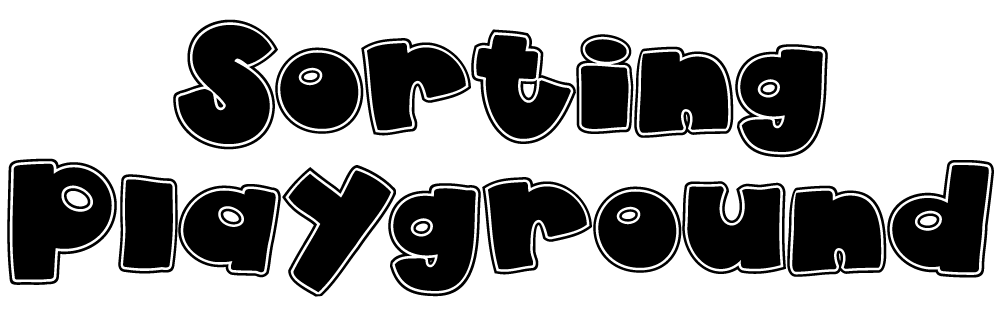
<style>
.page{position:relative;width:1000px;height:320px;background:#ffffff}
.page>*{position:absolute;margin:0}
.t1{font:126.5px/139.2px "akaDylanCollage";letter-spacing:0.005em;color:#000000}
</style>
<div class="page">
<p class="t1" style="left:7px;top:19px;width:987px;height:278px;text-align:center">Sorting<br>Playground</p>
</div>
